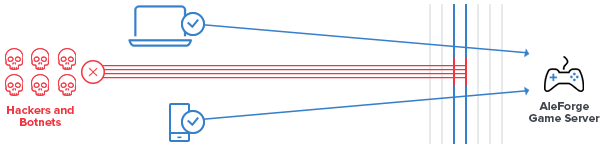
<style>
.page{position:relative;width:600px;height:148px;background:#ffffff}
.page>*{position:absolute;margin:0}
.t1{font:12px "ProximaNova-Bold";color:#414750}
.t2{font:12px "ProximaNova-Bold";color:#f13542}
</style>
<div class="page">
<p class="t1" style="left:529px;top:102px;width:71px;height:20px">AleForge Game Server</p>
<p class="t2" style="left:7px;top:106px;width:67px;height:20px">Hackers and Botnets</p>
</div>
